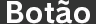
<style>
.page{position:relative;width:96px;height:24px;background:#333333}
.page>*{position:absolute;margin:0}
.t1{font:28px "RodinPro-B";letter-spacing:0.019em;color:#fdfcfd}
</style>
<div class="page">
<p class="t1" style="left:7px;top:0px;width:83px;height:24px">Botão</p>
</div>
